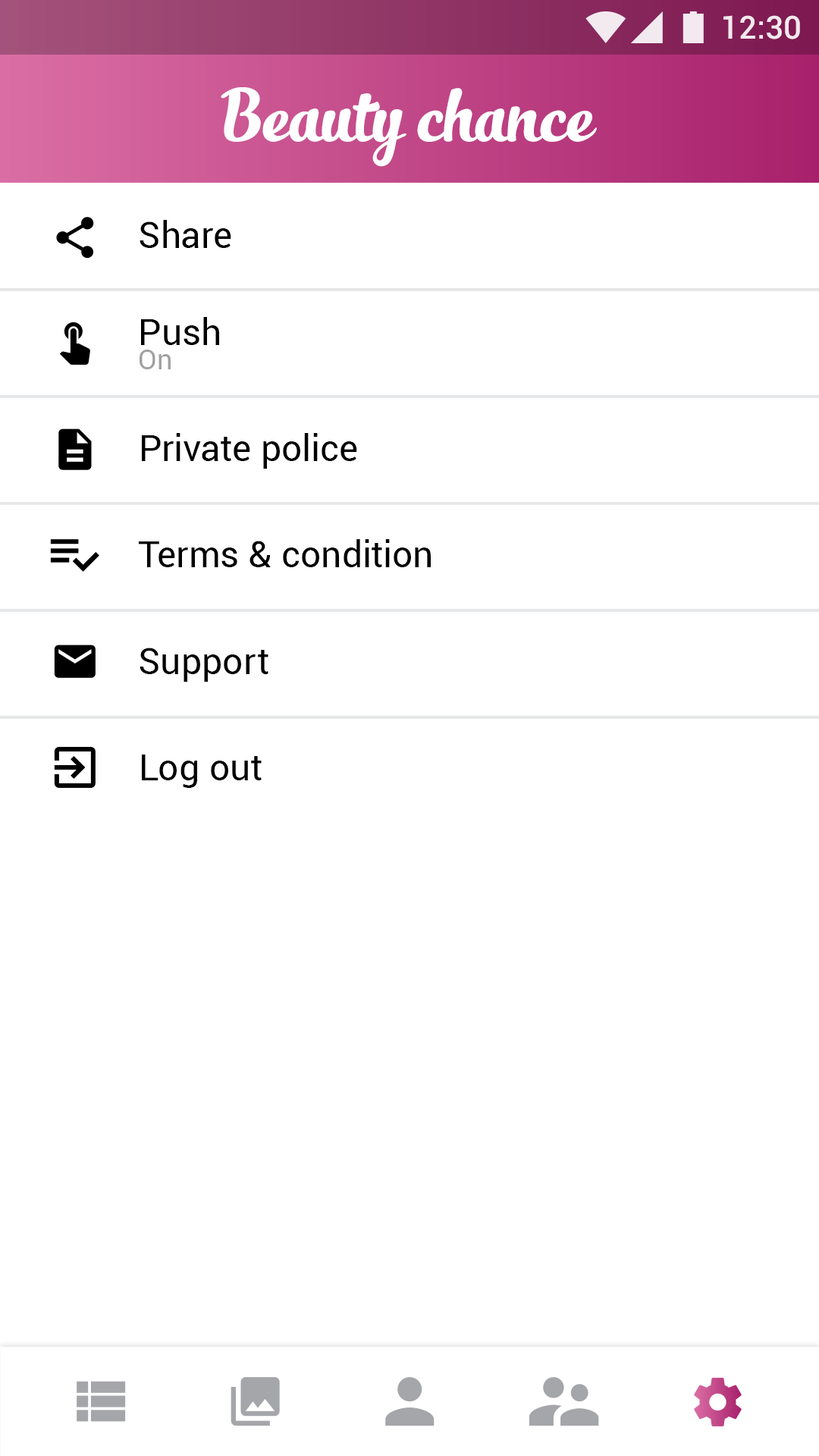
<style>
.page{position:relative;width:819px;height:1456px;background:#ffffff}
.page>*{position:absolute;margin:0}
.t1{font:31.8px "Roboto-Medium";color:#ffffff}
.t2{font:54.6px "SlimTony-Italic";color:#ffffff}
.t3{font:36.4px "Roboto-Regular";letter-spacing:0.01em;color:#000000}
.t4{font:27.3px "Roboto-Regular";letter-spacing:0.01em;color:#a1a1a1}
</style>
<div class="page">
<p class="t1" style="left:723px;top:15px;width:77px;height:24px">12:30</p>
<p class="t2" style="left:221px;top:87px;width:376px;height:80px">Beauty chance</p>
<p class="t3" style="left:140px;top:220px;width:91px;height:28px">Share</p>
<p class="t3" style="left:141px;top:317px;width:78px;height:28px">Push</p>
<p class="t4" style="left:140px;top:350px;width:31px;height:19px">On</p>
<p class="t3" style="left:142px;top:433px;width:215px;height:36px">Private police</p>
<p class="t3" style="left:138px;top:539px;width:293px;height:28px">Terms &amp; condition</p>
<p class="t3" style="left:140px;top:648px;width:128px;height:34px">Support</p>
<p class="t3" style="left:142px;top:755px;width:120px;height:33px">Log out</p>
</div>
